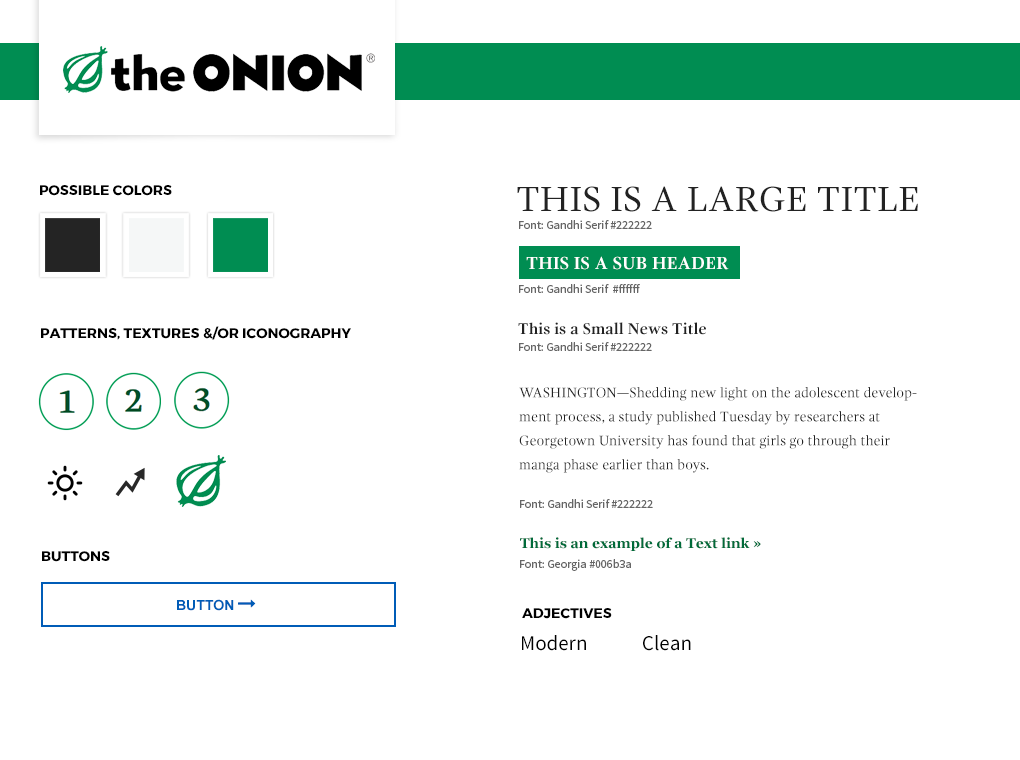
<style>
.page{position:relative;width:1020px;height:760px;background:#ffffff}
.page>*{position:absolute;margin:0}
.t1{font:14px "Montserrat-Bold";color:#000000;text-transform:uppercase}
.t2{font:36px "GandhiSerif-Regular";color:#222222;text-transform:uppercase}
.t3{font:12px "SourceSansPro-Regular";color:#666666}
.t4{font:18px "GandhiSerif-Bold";color:#ffffff;text-transform:uppercase}
.t5{font:14px "Montserrat-Bold";color:#000000}
.t6{font:16px "GandhiSerif-Bold";color:#222222}
.t7{font:14px/24px "GandhiSerif-Regular";color:#222222}
.t8{font:14px "Georgia-Bold";color:#006b3a}
.t9{font:21px "SourceSansPro-Regular";color:#000000}
</style>
<div class="page">
<p class="t1" style="left:40px;top:185px;width:132px;height:11px">Possible Colors</p>
<p class="t2" style="left:517px;top:186px;width:401px;height:26px">This is a Large Title</p>
<p class="t3" style="left:519px;top:220px;width:133px;height:9px">Font: Gandhi Serif #222222</p>
<p class="t4" style="left:526px;top:256px;width:203px;height:14px">This is a Sub Header</p>
<p class="t3" style="left:519px;top:284px;width:121px;height:9px">Font: Gandhi Serif  #ffffff</p>
<p class="t5" style="left:41px;top:326px;width:310px;height:14px">PATTERNS, TEXTURES &amp;/OR ICONOGRAPHY</p>
<p class="t6" style="left:518px;top:322px;width:188px;height:13px">This is a Small News Title</p>
<p class="t3" style="left:519px;top:342px;width:133px;height:9px">Font: Gandhi Serif #222222</p>
<p class="t7" style="left:519px;top:387px;width:398px;height:86px">WASHINGTON—Shedding new light on the adolescent development process, a study published Tuesday by researchers at Georgetown University has found that girls go through their manga phase earlier than boys.</p>
<p class="t3" style="left:520px;top:499px;width:133px;height:9px">Font: Gandhi Serif #222222</p>
<p class="t8" style="left:520px;top:537px;width:241px;height:14px">This is an example of a Text link »</p>
<p class="t5" style="left:42px;top:551px;width:68px;height:11px">BUTTONS</p>
<p class="t3" style="left:520px;top:559px;width:111px;height:12px">Font: Georgia #006b3a</p>
<p class="t1" style="left:522px;top:608px;width:90px;height:11px">Adjectives</p>
<p class="t9" style="left:522px;top:635px;width:64px;height:16px">Modern</p>
<p class="t9" style="left:643px;top:635px;width:48px;height:16px">Clean</p>
</div>
